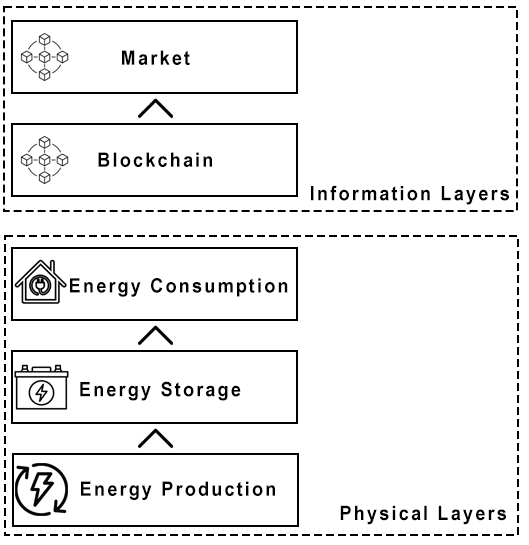
<style>
.page{position:relative;width:529px;height:545px;background:#ffffff}
.page>*{position:absolute;margin:0}
.t1{font:20px "ArialNarrow-Bold";letter-spacing:0.1em;color:#000000;scale:1.1 1}
</style>
<div class="page">
<p class="t1" style="left:122px;top:50px;width:68px;height:15px">Market</p>
<p class="t1" style="left:98px;top:152px;width:114px;height:15px">Blockchain</p>
<p class="t1" style="left:311px;top:185px;width:198px;height:20px">Information Layers</p>
<p class="t1" style="left:70px;top:278px;width:218px;height:19px">Energy Consumption</p>
<p class="t1" style="left:80px;top:381px;width:161px;height:20px">Energy Storage</p>
<p class="t1" style="left:81px;top:481px;width:194px;height:19px">Energy Production</p>
<p class="t1" style="left:340px;top:505px;width:166px;height:20px">Physical Layers</p>
</div>
